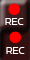
<style>
.page{position:relative;width:30px;height:60px;background:#331111}
.page>*{position:absolute;margin:0}
.t1{font:10.7px "SimianText-Orangutan";color:#ffffff}
</style>
<div class="page">
<p class="t1" style="left:5px;top:18px;width:19px;height:7px">REC</p>
<p class="t1" style="left:6px;top:47px;width:19px;height:7px">REC</p>
</div>
